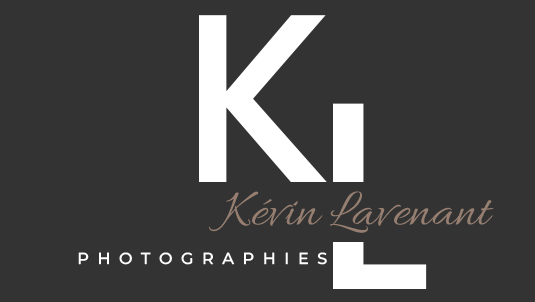
<style>
.page{position:relative;width:535px;height:302px;background:#333333}
.page>*{position:absolute;margin:0}
.t1{font:240px "Poppins-Medium";color:#ffffff}
.t2{font:53.3px "Allura-Regular";color:#967f71}
.t3{font:16px "MontserratRoman-Medium";color:#ffffff}
</style>
<div class="page">
<p class="t1" style="left:199px;top:15px;width:128px;height:167px">K</p>
<p class="t2" style="left:209px;top:191px;width:285px;height:42px">Kévin Lavenant</p>
<p class="t3" style="left:78px;top:252px;width:249px;height:13px">P  H  O  T  O  G  R  A  P  H  I  E  S</p>
</div>
